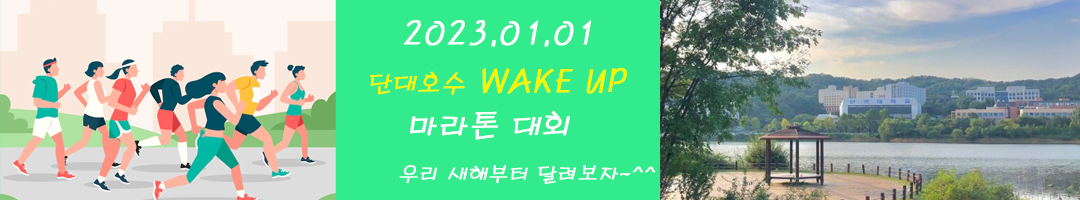
<style>
.page{position:relative;width:1080px;height:200px;background:#31eb8d}
.page>*{position:absolute;margin:0}
.t1{font:32px "H2porL";color:#ffffff;font-weight:bold;font-style:italic}
.t2{font:32px "H2porL";color:#f8f503;font-weight:bold;font-style:italic}
.t3{font:24px "H2porL";color:#fff600;font-weight:bold;font-style:italic}
.t4{font:30px "H2porL";color:#ffffff;font-weight:bold;font-style:italic}
.t5{font:20px "H2porL";color:#ffffff;font-weight:bold;font-style:italic}
</style>
<div class="page">
<p class="t1" style="left:403px;top:20px;width:188px;height:27px">2023.01.01</p>
<p class="t2" style="left:370px;top:68px;width:257px;height:27px"><span class="t3">단대호수 </span>WAKE UP</p>
<p class="t4" style="left:410px;top:111px;width:160px;height:29px">마라톤 대회</p>
<p class="t5" style="left:399px;top:165px;width:257px;height:19px">우리 새해부터 달려보자~^^</p>
</div>
